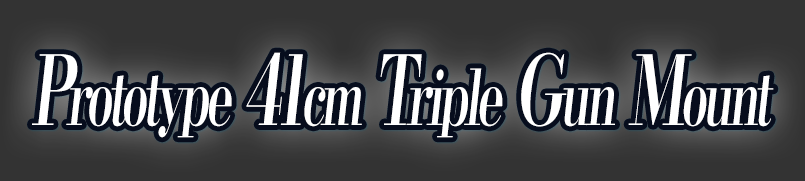
<style>
.page{position:relative;width:805px;height:181px;background:#333333}
.page>*{position:absolute;margin:0}
.t1{font:76.8px "KochoStd-Heavy";letter-spacing:-0.08em;color:#ffffff;font-style:italic;scale:0.63 1}
.t2{font:96px "KochoStd-Heavy";letter-spacing:-0.08em;color:#ffffff;font-style:italic;scale:0.63 1}
</style>
<div class="page">
<p class="t1" style="left:32px;top:52px;width:742px;height:86px"><span class="t2">P</span>rototype<span class="t2"> 41</span>cm<span class="t2"> T</span>riple<span class="t2"> G</span>un<span class="t2"> M</span>ount</p>
</div>
